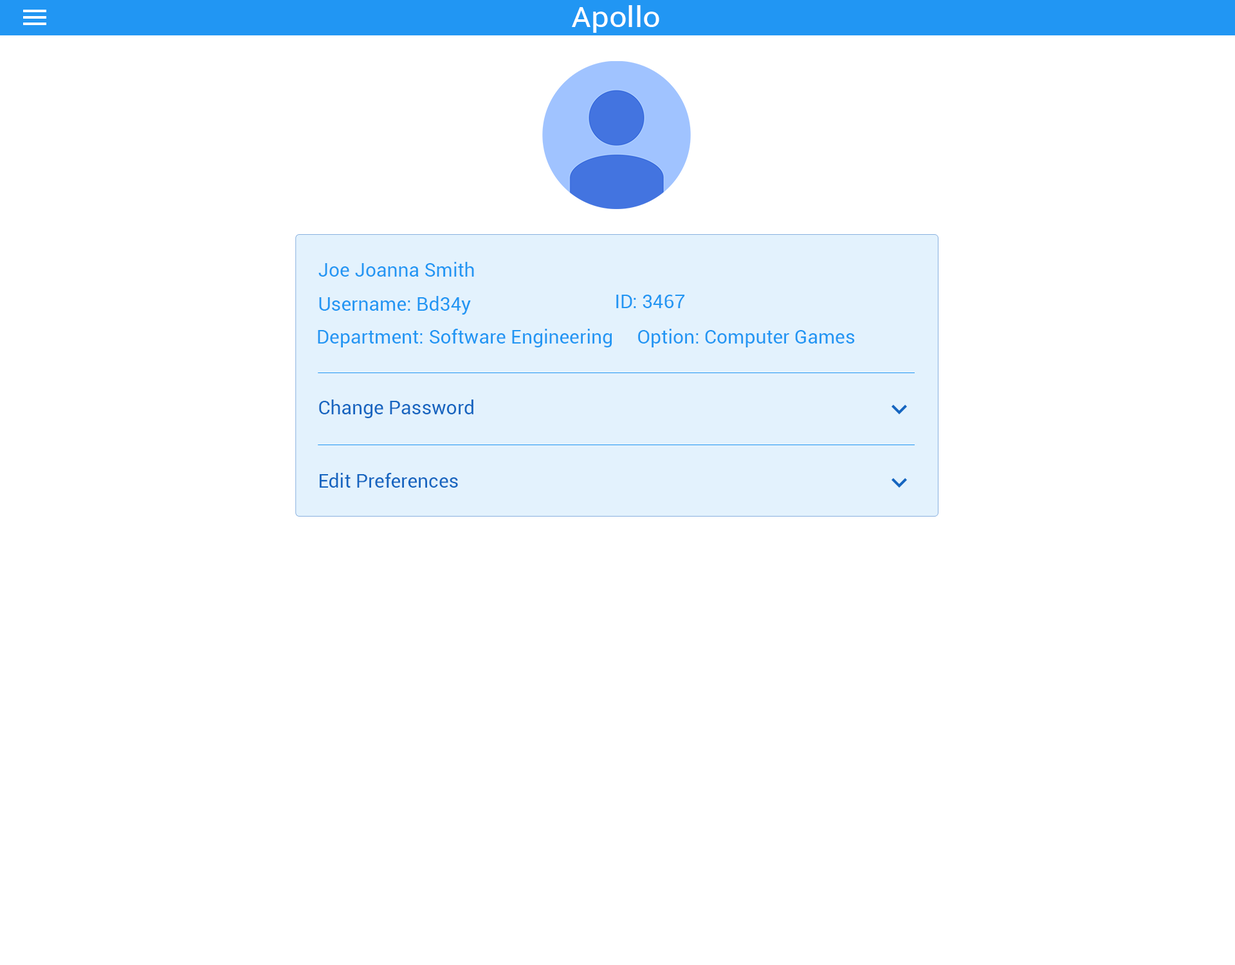
<style>
.page{position:relative;width:1235px;height:965px;background:#ffffff}
.page>*{position:absolute;margin:0}
.t1{font:29px "Roboto-Regular";color:#ffffff;scale:1.08 1}
.t2{font:19.3px "Roboto-Regular";color:#2196f3}
.t3{font:19.1px "Roboto-Regular";color:#2196f3}
.t4{font:19.3px "Roboto-Regular";color:#1565c0}
</style>
<div class="page">
<p class="t1" style="left:572px;top:5px;width:88px;height:28px">Apollo</p>
<p class="t2" style="left:319px;top:262px;width:155px;height:15px">Joe Joanna Smith</p>
<p class="t2" style="left:319px;top:296px;width:152px;height:19px">Username: Bd34y</p>
<p class="t2" style="left:616px;top:295px;width:69px;height:13px">ID: 3467</p>
<p class="t3" style="left:318px;top:329px;width:294px;height:18px">Department: Software Engineering</p>
<p class="t3" style="left:638px;top:329px;width:217px;height:18px">Option: Computer Games</p>
<p class="t4" style="left:319px;top:400px;width:155px;height:18px">Change Password</p>
<p class="t4" style="left:320px;top:473px;width:138px;height:15px">Edit Preferences</p>
</div>
